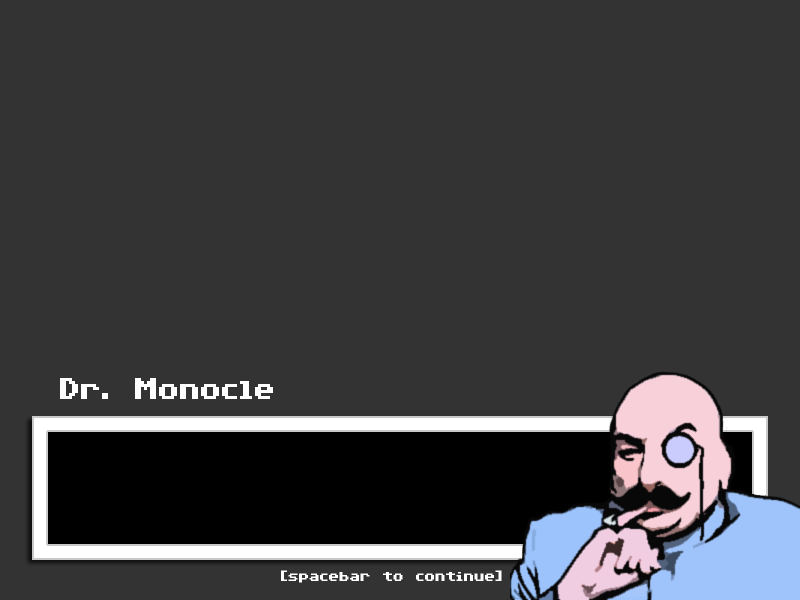
<style>
.page{position:relative;width:800px;height:600px;background:#333333}
.page>*{position:absolute;margin:0}
.t1{font:24px "C64Pro";color:#ffffff}
.t2{font:12px "C64Pro";color:#ffffff}
</style>
<div class="page">
<p class="t1" style="left:60px;top:378px;width:213px;height:21px">Dr. Monocle</p>
<p class="t2" style="left:281px;top:570px;width:221px;height:13px">[spacebar to continue]</p>
</div>
